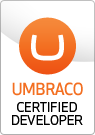
<style>
.page{position:relative;width:95px;height:135px;background:#ffffff}
.page>*{position:absolute;margin:0}
.t1{font:16.2px "ApexNew-Medium";color:#f36f21;text-transform:uppercase}
.t2{font:16.2px "ApexNew-Medium";letter-spacing:-0.06em;color:#f36f21;text-transform:uppercase}
.t3{font:16.2px "ApexNew-Medium";letter-spacing:-0.05em;color:#f36f21;text-transform:uppercase}
.t4{font:13.2px/13.2px "ApexNew-Book";color:#000000;text-transform:uppercase}
</style>
<div class="page">
<p class="t1" style="left:12px;top:82px;width:71px;height:14px">umb<span class="t2">r</span><span class="t3">ac</span>o</p>
<p class="t4" style="left:12px;top:102px;width:71px;height:23px;text-align:center">Certified<br>developer</p>
<p class="t4" style="left:12px;top:102px;width:71px;height:23px;text-align:center;opacity:0.4">Certified<br>developer</p>
</div>
